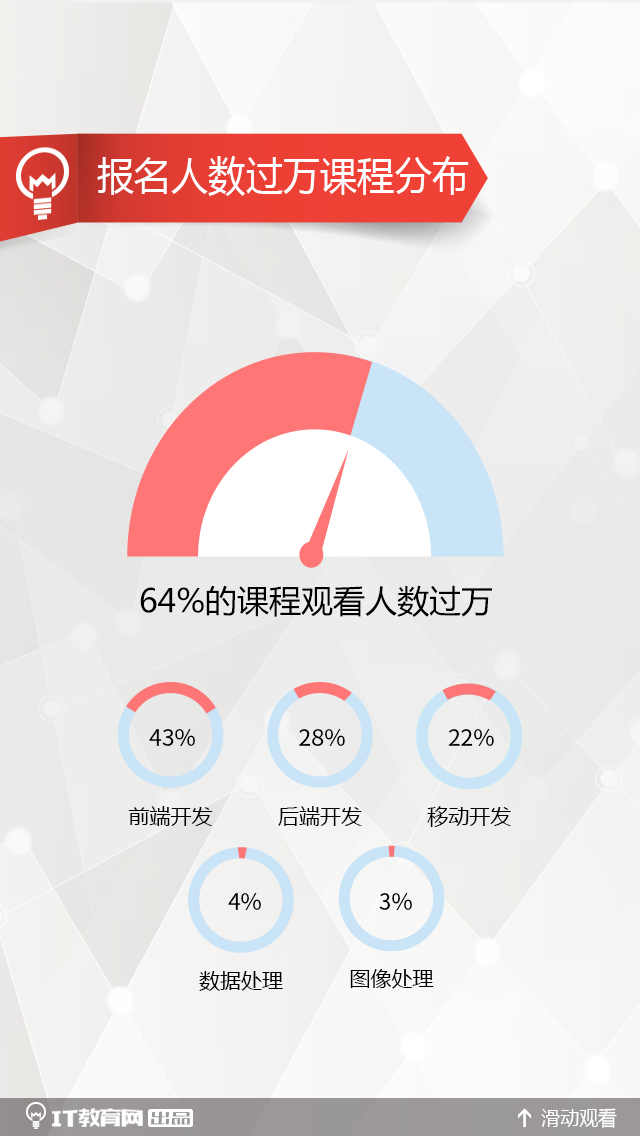
<style>
.page{position:relative;width:640px;height:1136px}
.page>*{position:absolute;margin:0}
.t1{font:40px "MicrosoftYaHei";color:#ffffff;scale:0.93 1}
.t2{font:32px "MicrosoftYaHei";color:#000000}
.t3{font:23.1px "NotoSansHans-Regular";color:#000000}
.t4{font:21px "MicrosoftYaHei";color:#000000}
.t5{font:20.2px "MicrosoftYaHei";color:#ffffff;scale:0.94 1}
</style>
<div class="page">
<p class="t1" style="left:97px;top:156px;width:372px;height:40px">报名人数过万课程分布</p>
<p class="t2" style="left:140px;top:585px;width:352px;height:32px">64%的课程观看人数过万</p>
<p class="t3" style="left:149px;top:729px;width:46px;height:17px">43%</p>
<p class="t3" style="left:299px;top:729px;width:46px;height:17px">28%</p>
<p class="t3" style="left:448px;top:729px;width:46px;height:17px">22%</p>
<p class="t4" style="left:128px;top:806px;width:85px;height:20px">前端开发</p>
<p class="t4" style="left:278px;top:806px;width:84px;height:20px">后端开发</p>
<p class="t4" style="left:427px;top:806px;width:84px;height:21px">移动开发</p>
<p class="t3" style="left:228px;top:893px;width:33px;height:17px">4%</p>
<p class="t3" style="left:379px;top:893px;width:33px;height:17px">3%</p>
<p class="t4" style="left:199px;top:971px;width:84px;height:20px">数据处理</p>
<p class="t4" style="left:350px;top:969px;width:84px;height:20px">图像处理</p>
<p class="t5" style="left:541px;top:1108px;width:76px;height:20px">滑动观看</p>
</div>
